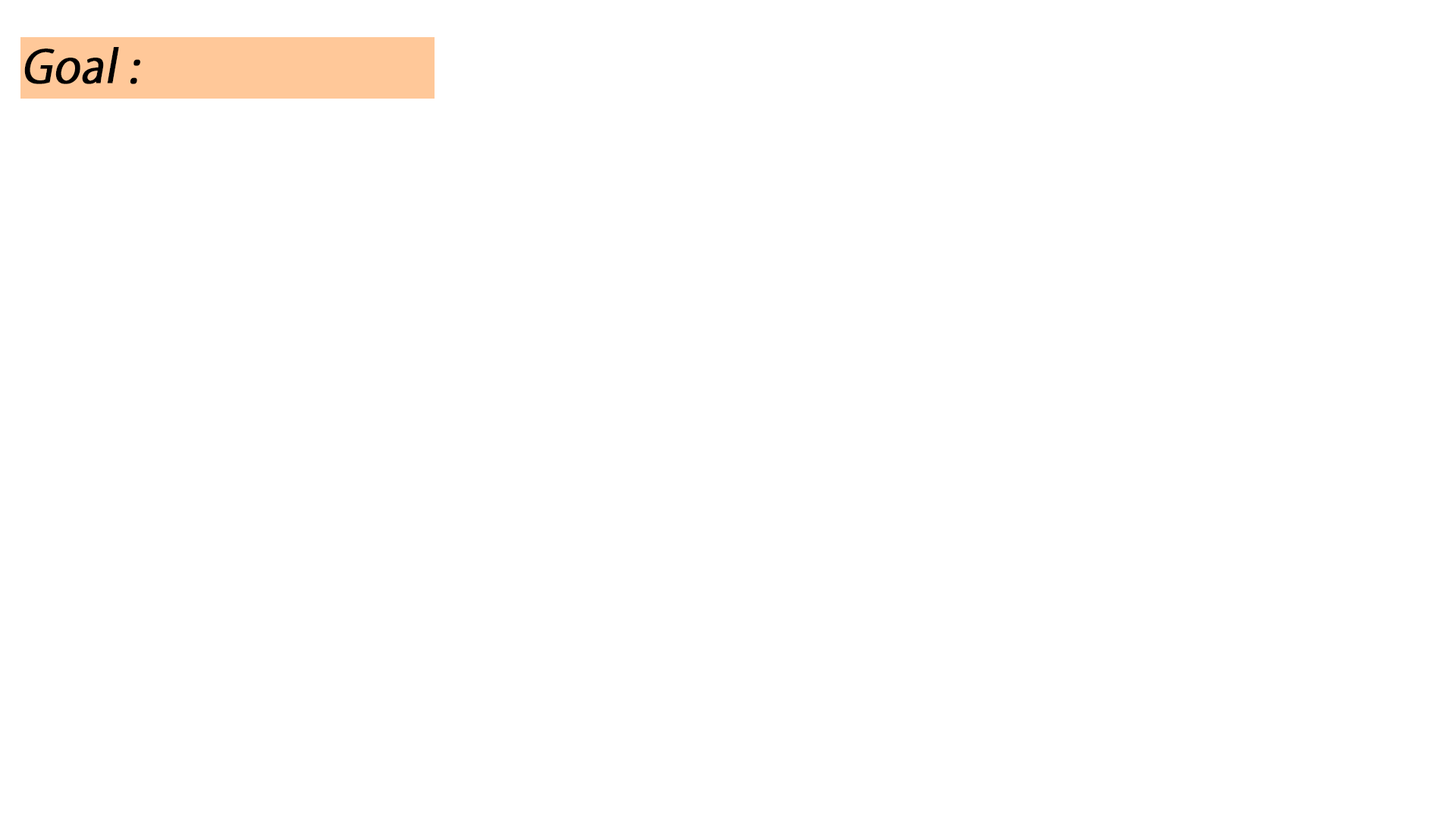
<style>
.page{position:relative;width:1456px;height:819px;background:#ffffff}
.page>*{position:absolute;margin:0}
.t1{font:44.2px "KozGoPr6N-Regular";color:#000000;font-weight:bold;font-style:italic}
</style>
<div class="page">
<p class="t1" style="left:24px;top:47px;width:116px;height:37px">Goal :</p>
</div>
